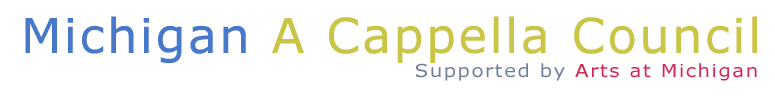
<style>
.page{position:relative;width:775px;height:98px;background:#ffffff}
.page>*{position:absolute;margin:0}
.t1{font:48px "Verdana";letter-spacing:0.025em;color:#cac547;font-weight:bold}
.t2{font:48px "Verdana";letter-spacing:0.025em;color:#4778ca;font-weight:bold}
.t3{font:18px "Verdana";letter-spacing:0.075em;color:#d22854;scale:1.1 1}
.t4{font:18px "Verdana";letter-spacing:0.075em;color:#707f99;scale:1.1 1}
</style>
<div class="page">
<p class="t1" style="left:25px;top:16px;width:732px;height:48px"><span class="t2">Michigan</span> A Cappella Council</p>
<p class="t3" style="left:416px;top:63px;width:341px;height:18px"><span class="t4">Supported by </span>Arts at Michigan</p>
</div>
